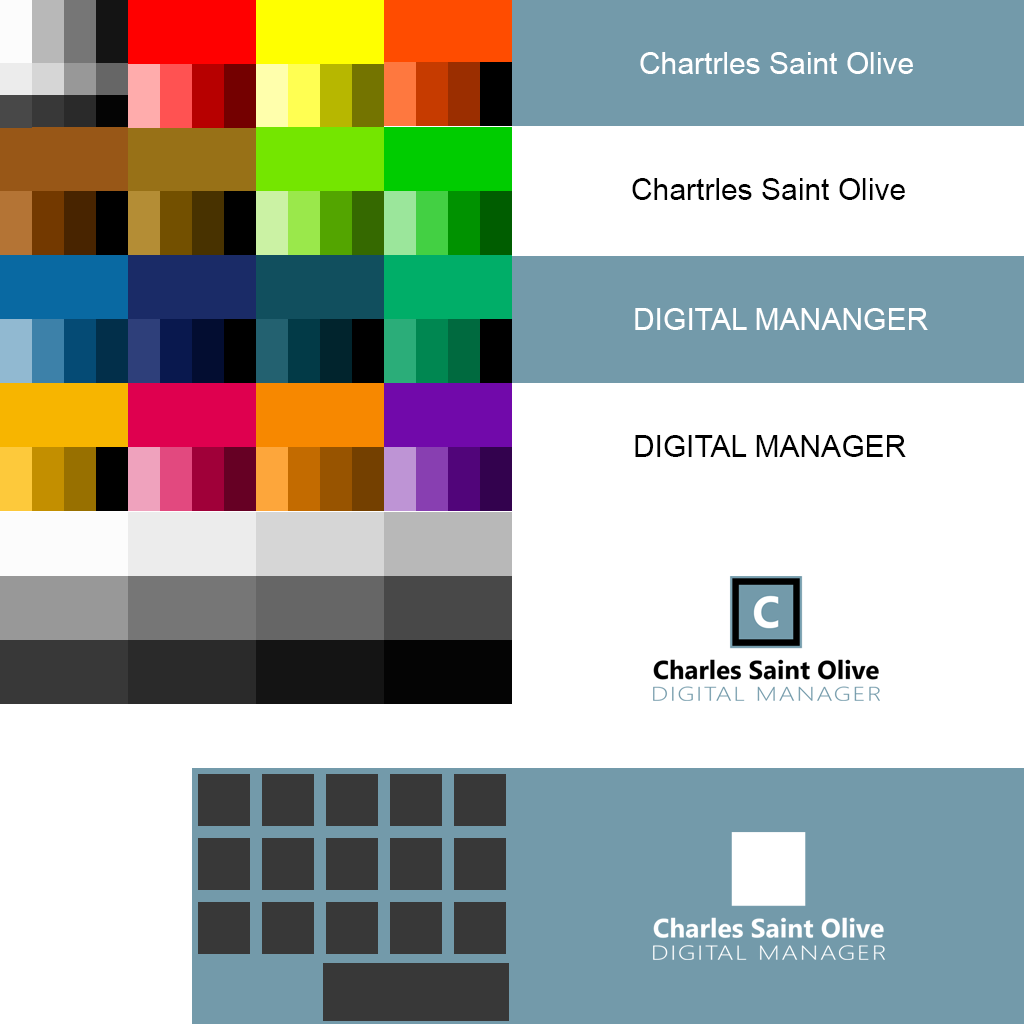
<style>
.page{position:relative;width:1024px;height:1024px;background:#ffffff}
.page>*{position:absolute;margin:0}
.t1{font:30px "ArialMT";color:#ffffff}
.t2{font:30px "ArialMT";color:#000000}
</style>
<div class="page">
<p class="t1" style="left:640px;top:52px;width:273px;height:22px">Chartrles Saint Olive</p>
<p class="t2" style="left:632px;top:178px;width:273px;height:22px">Chartrles Saint Olive</p>
<p class="t1" style="left:635px;top:308px;width:293px;height:22px">DIGITAL MANANGER</p>
<p class="t2" style="left:635px;top:435px;width:271px;height:22px">DIGITAL MANAGER</p>
</div>
